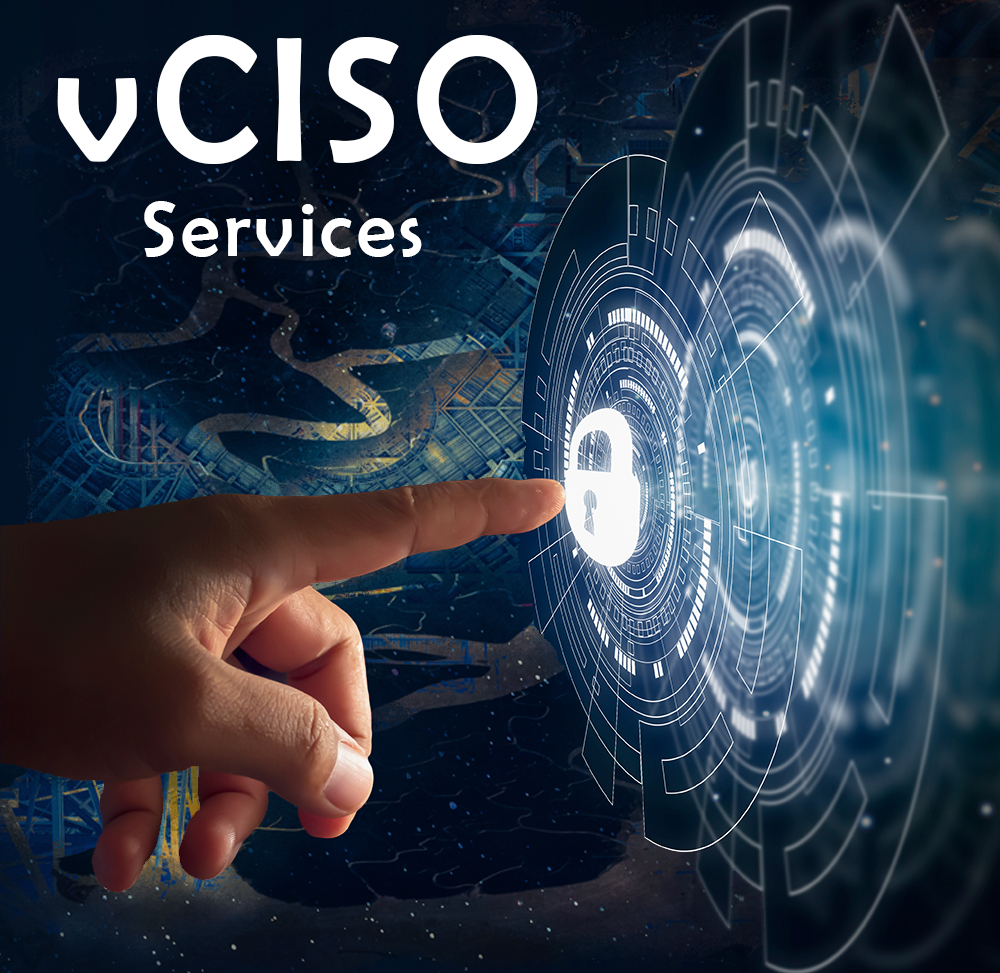
<style>
.page{position:relative;width:1000px;height:973px}
.page>*{position:absolute;margin:0}
.t1{font:180px "BerlinSansFB-Reg";letter-spacing:0.05em;color:#ffffff}
.t2{font:80px "BerlinSansFB-Reg";letter-spacing:0.05em;color:#ffffff}
</style>
<div class="page">
<p class="t1" style="left:57px;top:35px;width:481px;height:129px">vCISO</p>
<p class="t2" style="left:144px;top:201px;width:278px;height:56px">Services</p>
</div>
